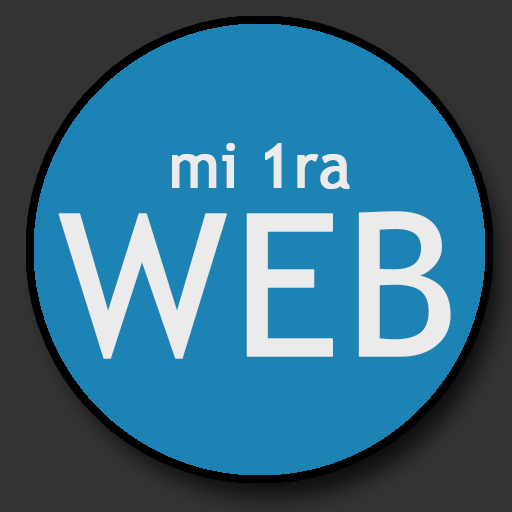
<style>
.page{position:relative;width:512px;height:512px;background:#1d83b4}
.page>*{position:absolute;margin:0}
.t1{font:60.7px "TrebuchetMS";color:#ebebeb;font-weight:bold}
.t2{font:199.1px "TrebuchetMS";color:#ebebeb;font-weight:bold}
</style>
<div class="page">
<p class="t1" style="left:172px;top:143px;width:178px;height:46px">mi 1ra</p>
<p class="t2" style="left:58px;top:211px;width:393px;height:148px">WEB</p>
</div>
